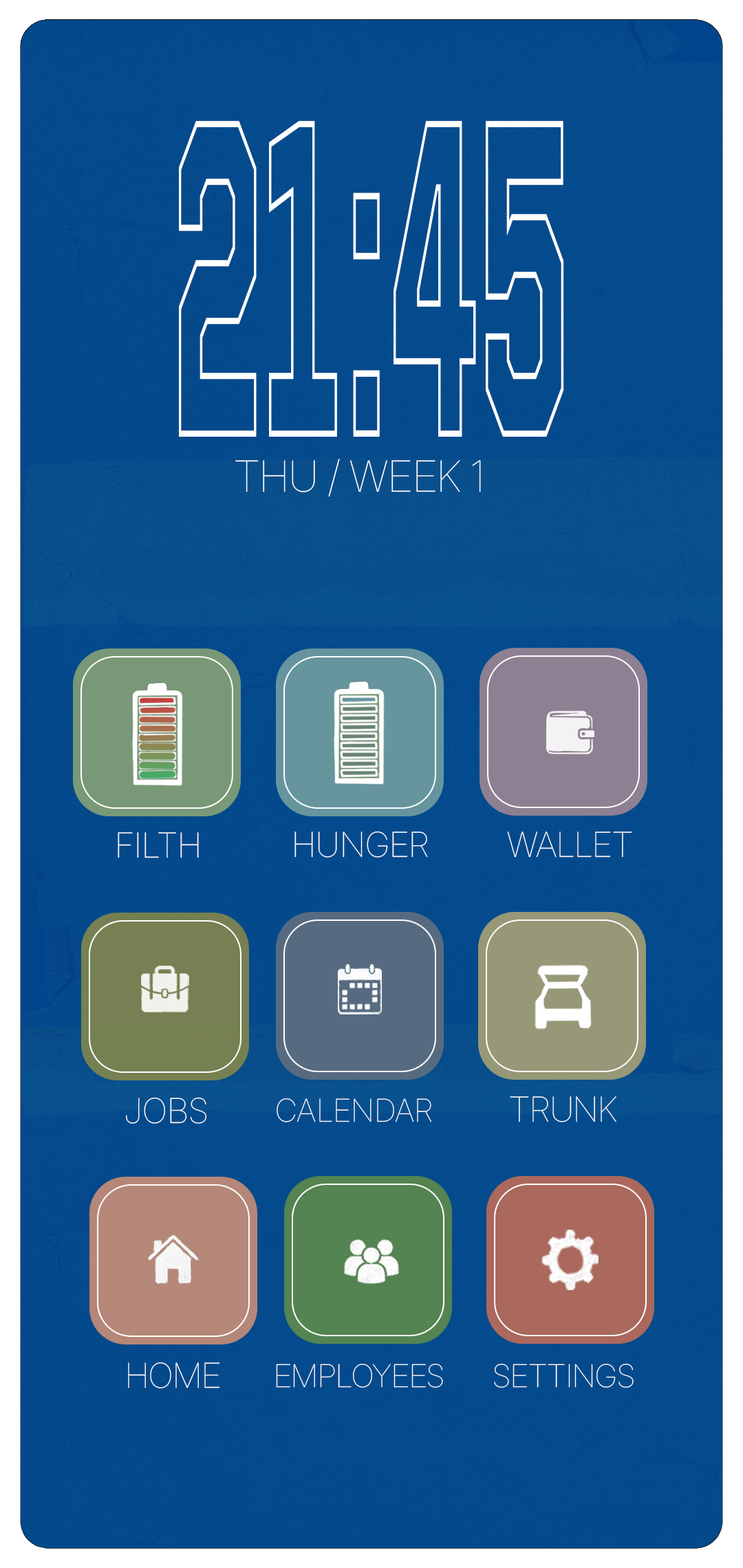
<style>
.page{position:relative;width:743px;height:1568px}
.page>*{position:absolute;margin:0}
.t1{font:451px "Tourney-Thin";color:#ffffff;scale:0.37 1}
.t2{font:43px "Inter28pt-Thin";color:#ffffff}
.t3{font:34.4px "Inter24pt-Thin";color:#ffffff}
.t4{font:34.4px "Inter28pt-Thin";color:#ffffff}
.t5{font:31.5px "Inter24pt-Thin";color:#ffffff}
.t6{font:31.5px "Inter28pt-Thin";color:#ffffff}
</style>
<div class="page">
<p class="t1" style="left:179px;top:120px;width:385px;height:317px">21:45</p>
<p class="t2" style="left:235px;top:459px;width:246px;height:38px">THU / WEEK 1</p>
<p class="t3" style="left:118px;top:832px;width:81px;height:26px">FILTH</p>
<p class="t3" style="left:294px;top:831px;width:134px;height:27px">HUNGER</p>
<p class="t4" style="left:507px;top:831px;width:125px;height:27px">WALLET</p>
<p class="t3" style="left:126px;top:1097px;width:81px;height:27px">JOBS</p>
<p class="t4" style="left:510px;top:1096px;width:106px;height:26px">TRUNK</p>
<p class="t5" style="left:276px;top:1098px;width:156px;height:24px">CALENDAR</p>
<p class="t4" style="left:128px;top:1362px;width:92px;height:27px">HOME</p>
<p class="t6" style="left:276px;top:1364px;width:167px;height:24px">EMPLOYEES</p>
<p class="t6" style="left:494px;top:1364px;width:139px;height:24px">SETTINGS</p>
</div>
